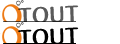
<style>
.page{position:relative;width:120px;height:44px;background:#ffffff}
.page>*{position:absolute;margin:0}
.t1{font:23.1px "RaspoutineDemiBold";letter-spacing:0.025em;color:#010101}
</style>
<div class="page">
<p class="t1" style="left:18px;top:27px;width:61px;height:19px;rotate:-3deg">TOUT</p>
</div>
